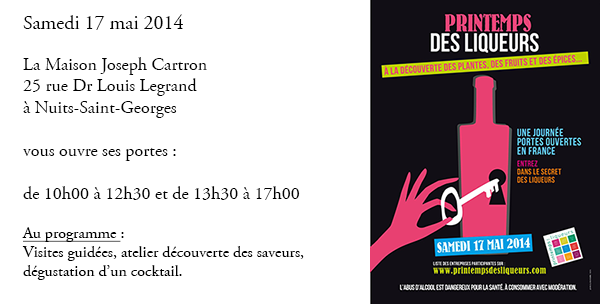
<style>
.page{position:relative;width:600px;height:304px;background:#ffffff}
.page>*{position:absolute;margin:0}
.t1{font:18px "AGaramondPro-Regular";color:#000000}
.t2{font:20px "AGaramondPro-Regular";color:#000000}
.t3{font:16px "AGaramondPro-Regular";color:#000000;text-decoration:underline}
.t4{font:16px "AGaramondPro-Regular";color:#000000}
</style>
<div class="page">
<p class="t1" style="left:22px;top:14px;width:282px;height:266px"><span class="t2">Samedi 17 mai 2014<br><br></span>La Maison Joseph Cartron <br>25 rue Dr Louis Legrand<br>à Nuits-Saint-Georges<br><br>vous ouvre ses portes :<br><br>de 10h00 à 12h30 et de 13h30 à 17h00<br><br><span class="t3">Au programme </span><span class="t4">: <br>Visites guidées, atelier découverte des saveurs,<br>dégustation d’un cocktail.</span></p>
</div>
